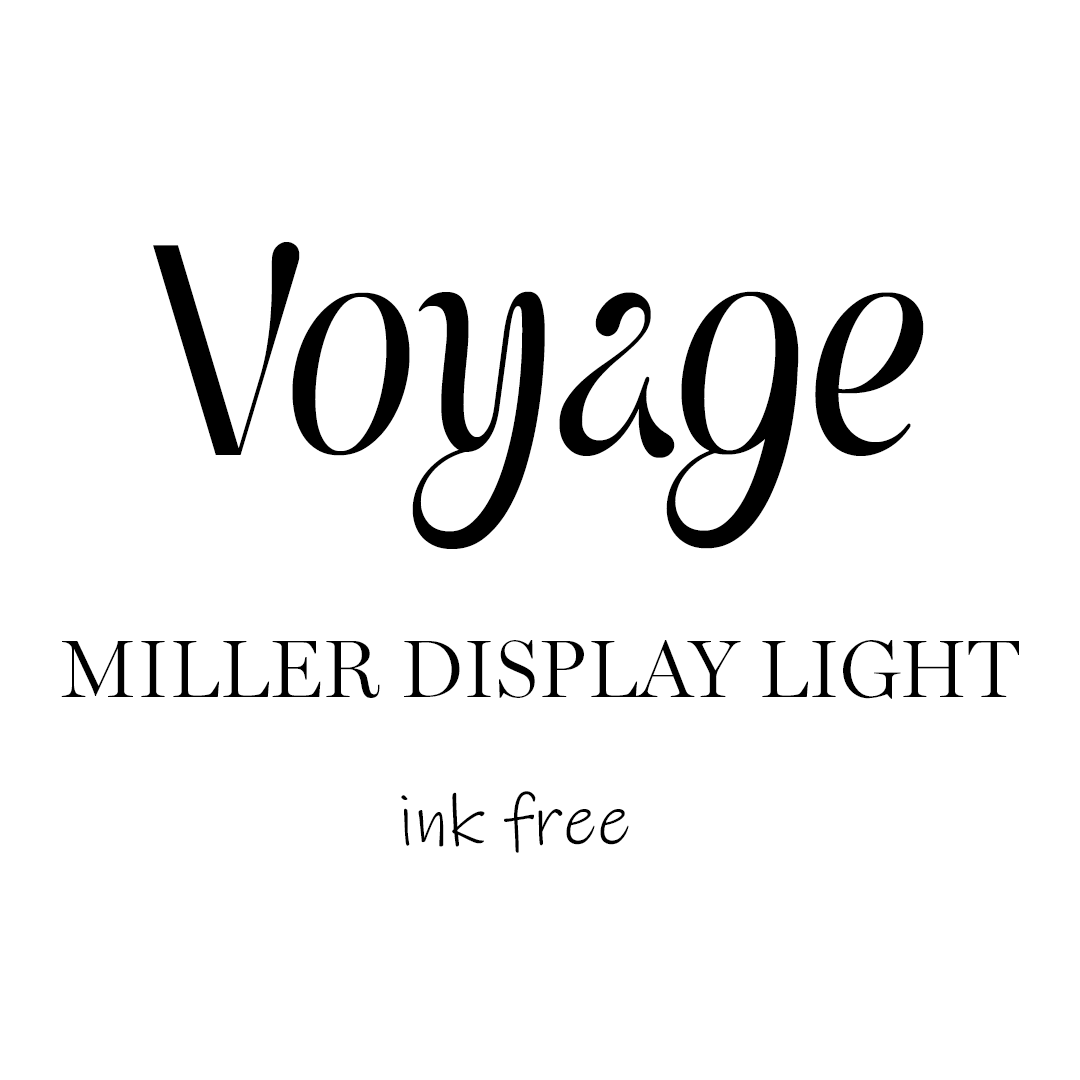
<style>
.page{position:relative;width:1080px;height:1080px;background:#ffffff}
.page>*{position:absolute;margin:0}
.t1{font:300px "VoyageRegular";color:#000000}
.t2{font:82px "MillerDisplay-Light";color:#000000;text-transform:uppercase}
.t3{font:72px "InkFree";color:#000000}
</style>
<div class="page">
<p class="t1" style="left:153px;top:242px;width:771px;height:307px">Voyage</p>
<p class="t2" style="left:61px;top:640px;width:958px;height:59px">Miller Display Light</p>
<p class="t3" style="left:401px;top:791px;width:228px;height:62px">ink free</p>
</div>
